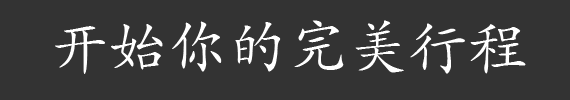
<style>
.page{position:relative;width:570px;height:100px;background:#333333}
.page>*{position:absolute;margin:0}
.t1{font:60px "STKaiti";color:#ffffff}
</style>
<div class="page">
<p class="t1" style="left:55px;top:20px;width:471px;height:54px">开始你的完美行程</p>
</div>
